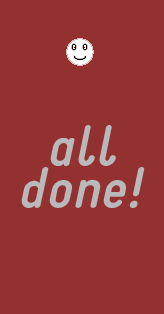
<style>
.page{position:relative;width:164px;height:314px;background:#933131}
.page>*{position:absolute;margin:0}
.t1{font:58.3px "StaticBoldItalic";color:#bab9b9}
</style>
<div class="page">
<p class="t1" style="left:50px;top:125px;width:66px;height:42px">all</p>
<p class="t1" style="left:21px;top:167px;width:124px;height:41px">done!</p>
</div>
